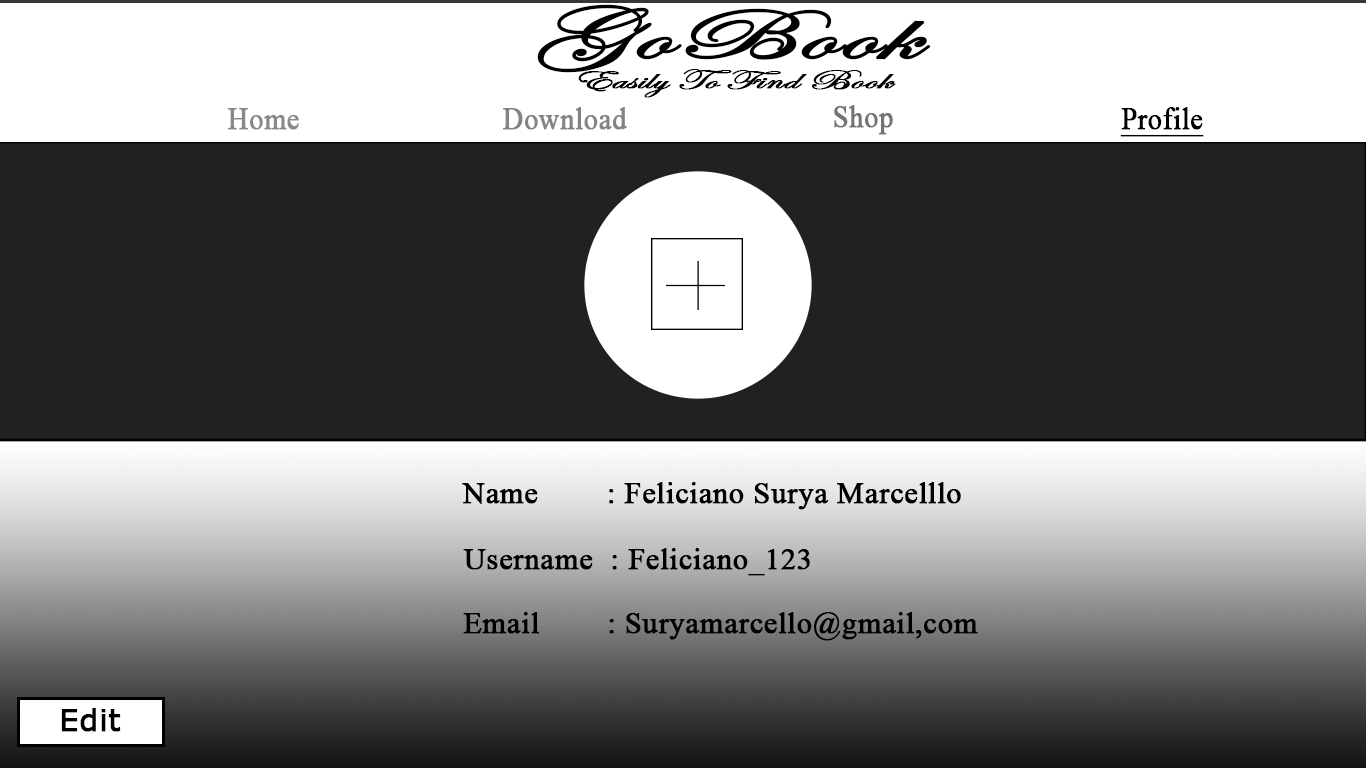
<style>
.page{position:relative;width:1366px;height:768px;background:#232020}
.page>*{position:absolute;margin:0}
.t1{font:71px "EdwardianScriptITC";color:#000000;font-weight:bold;scale:1.82 1}
.t2{font:28.2px "EdwardianScriptITC";color:#000000;font-weight:bold;scale:1.54 1}
.t3{font:30.7px "TimesNewRomanPSMT";color:#8a8888;font-weight:bold;scale:0.92 1}
.t4{font:30.7px "TimesNewRomanPSMT";color:#848282;font-weight:bold;scale:0.92 1}
.t5{font:30.7px "TimesNewRomanPSMT";color:#737373;font-weight:bold;scale:0.92 1}
.t6{font:30.7px "TimesNewRomanPSMT";color:#000000;font-weight:bold;text-decoration:underline;scale:0.92 1}
.t7{font:30.4px "TimesNewRomanPSMT";color:#000000;font-weight:bold}
.t8{font:30.4px "Verdana";color:#000000;font-weight:bold}
</style>
<div class="page">
<p class="t1" style="left:537px;top:4px;width:394px;height:69px">GoBook</p>
<p class="t2" style="left:578px;top:69px;width:318px;height:29px">Easily To Find Book</p>
<p class="t3" style="left:228px;top:108px;width:71px;height:22px">Home</p>
<p class="t4" style="left:503px;top:107px;width:124px;height:23px">Download</p>
<p class="t5" style="left:834px;top:105px;width:59px;height:30px">Shop</p>
<p class="t6" style="left:1120px;top:107px;width:84px;height:30px">Profile</p>
<p class="t7" style="left:462px;top:482px;width:499px;height:28px">Name   : Feliciano Surya Marcelllo</p>
<p class="t7" style="left:463px;top:548px;width:347px;height:28px">Username  : Feliciano_123</p>
<p class="t7" style="left:463px;top:612px;width:515px;height:29px">Email  : Suryamarcello@gmail,com</p>
<p class="t8" style="left:61px;top:708px;width:60px;height:24px">Edit</p>
</div>
